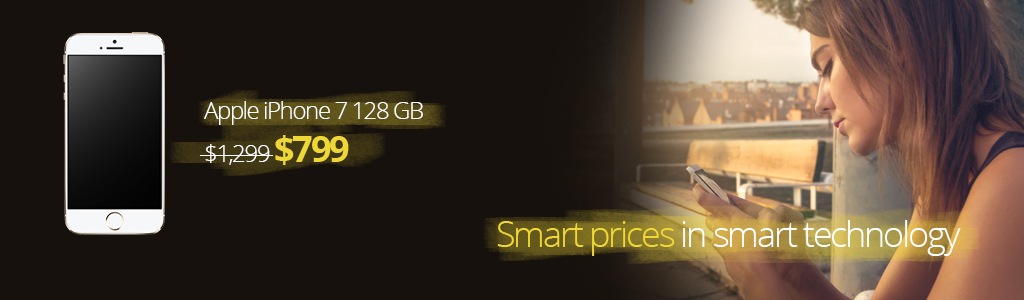
<style>
.page{position:relative;width:1024px;height:300px;background:#17110d}
.page>*{position:absolute;margin:0}
.t1{font:24px "OpenSans-Light";letter-spacing:-0.06em;color:#ffffff}
.t2{font:36px "OpenSans-Bold";letter-spacing:-0.06em;color:#efd736}
.t3{font:36px "OpenSans-Light";letter-spacing:-0.06em;color:#ffffff}
.t4{font:36px "OpenSans-Light";letter-spacing:-0.06em;color:#efd736}
</style>
<div class="page">
<p class="t1" style="left:204px;top:101px;width:219px;height:64px">Apple iPhone 7 128 GB<br>$1,299 <span class="t2">$799</span></p>
<p class="t3" style="left:497px;top:220px;width:464px;height:36px"><span class="t4">Smart prices </span>in smart technology</p>
</div>
